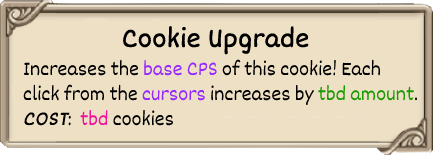
<style>
.page{position:relative;width:433px;height:155px;background:#ede0c4}
.page>*{position:absolute;margin:0}
.t1{font:29px "Dekko";color:#000000;font-weight:bold}
.t2{font:21px "Dekko";color:#000000}
.t3{font:21px "Dekko";color:#9428ff}
.t4{font:21px "Dekko";color:#1b9902}
.t5{font:21px "Dekko";color:#000000;font-weight:bold;font-style:italic}
.t6{font:21px "Dekko";color:#f0129a}
</style>
<div class="page">
<p class="t1" style="left:123px;top:26px;width:186px;height:29px">Cookie Upgrade</p>
<p class="t2" style="left:23px;top:59px;width:395px;height:67px">Increases the <span class="t3">base CPS </span>of this cookie! Each <br>click from the <span class="t3">cursors </span>increases by <span class="t4">tbd amount</span>.<br><span class="t5">COST</span>:  <span class="t6">tbd </span>cookies</p>
</div>
